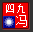
<style>
.page{position:relative;width:33px;height:32px;background:#f20000}
.page>*{position:absolute;margin:0}
.t1{font:10.4px "SimSun";color:#ffffff}
.t2{font:11.7px "SimSun";color:#ffffff}
</style>
<div class="page">
<p class="t1" style="left:6px;top:4px;width:19px;height:9px">四九</p>
<p class="t2" style="left:16px;top:15px;width:11px;height:12px">冯</p>
</div>
